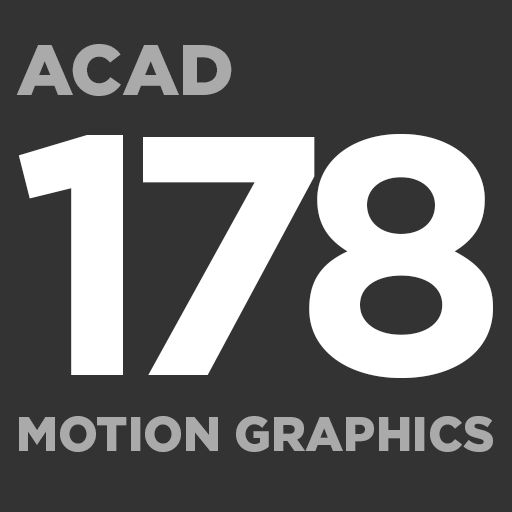
<style>
.page{position:relative;width:512px;height:512px;background:#333333}
.page>*{position:absolute;margin:0}
.t1{font:72px "Gotham-Black";color:#aaaaaa}
.t2{font:340px "Gotham-Bold";letter-spacing:-0.1em;color:#ffffff}
.t3{font:48px "Gotham-Black";color:#aaaaaa}
</style>
<div class="page">
<p class="t1" style="left:16px;top:44px;width:216px;height:52px">ACAD</p>
<p class="t2" style="left:18px;top:134px;width:475px;height:245px">178</p>
<p class="t3" style="left:19px;top:416px;width:474px;height:36px">MOTION GRAPHICS</p>
</div>
